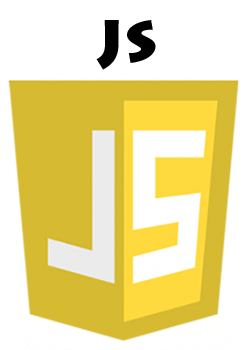
<style>
.page{position:relative;width:252px;height:350px;background:#ffffff}
.page>*{position:absolute;margin:0}
.t1{font:60px "LithosPro-Black";color:#000000}
</style>
<div class="page">
<p class="t1" style="left:96px;top:20px;width:60px;height:50px">JS</p>
</div>
